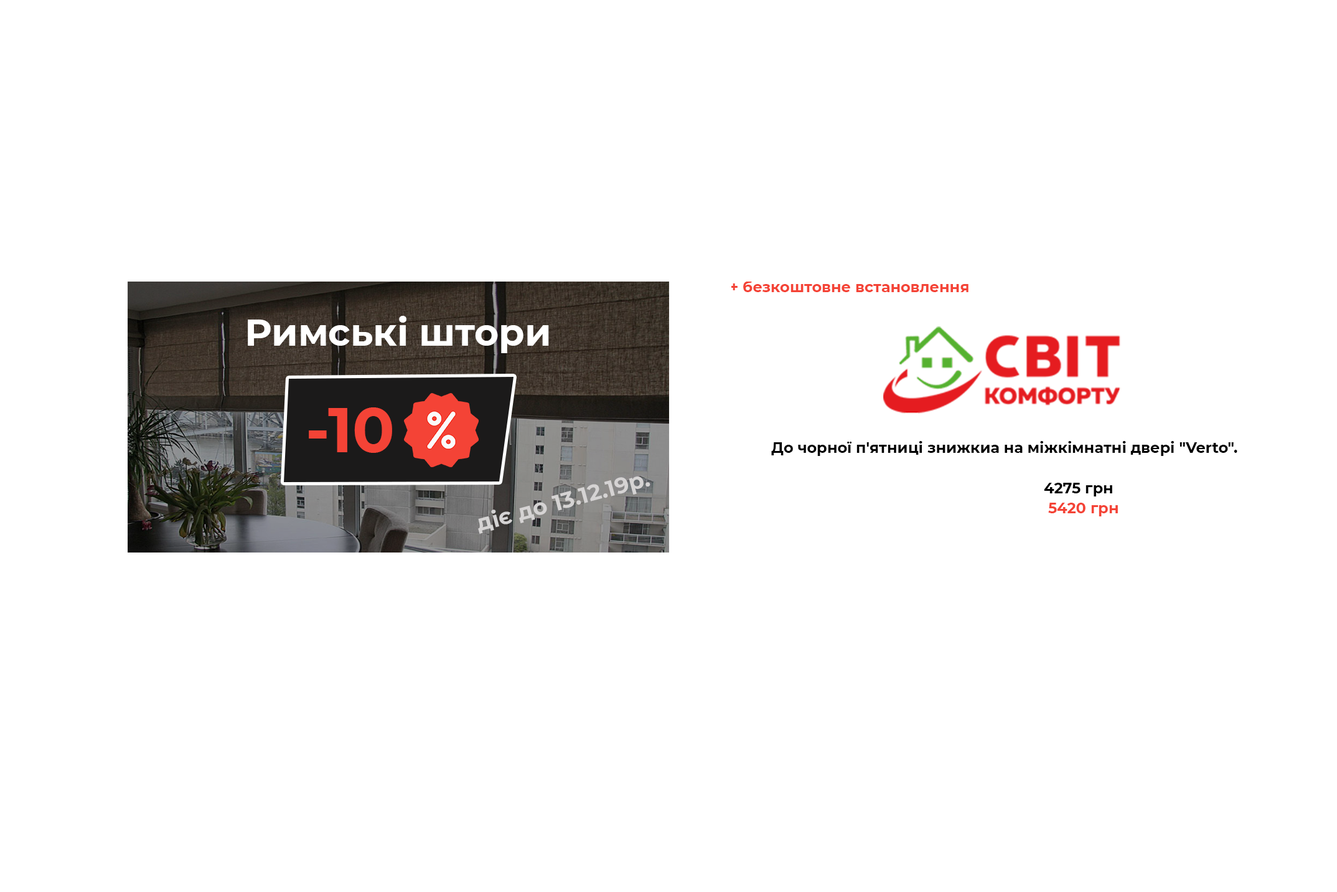
<style>
.page{position:relative;width:1337px;height:892px;background:#ffffff}
.page>*{position:absolute;margin:0}
.t1{font:14.9px "Montserrat-Bold";color:#f44336}
.t2{font:37.4px "Montserrat-Bold";color:#ffffff}
.t3{font:62.3px "Montserrat-Bold";color:#f44336}
.t4{font:14.9px "Montserrat-Bold";color:#000000}
.t5{font:22.4px "Montserrat-Bold";color:#d5d3d3}
</style>
<div class="page">
<p class="t1" style="left:730px;top:280px;width:239px;height:12px">+ безкоштовне встановлення</p>
<p class="t2" style="left:248px;top:316px;width:301px;height:37px">Римські штори</p>
<p class="t3" style="left:309px;top:407px;width:83px;height:46px">-10</p>
<p class="t4" style="left:771px;top:441px;width:467px;height:15px">До чорної п'ятниці знижкиа на міжкімнатні двері "Verto".</p>
<p class="t5" style="left:478px;top:476px;width:173px;height:58px;rotate:-15deg">діє до 13.12.19р.</p>
<p class="t4" style="left:1044px;top:483px;width:69px;height:13px">4275 грн</p>
<p class="t1" style="left:1049px;top:502px;width:69px;height:14px">5420 грн</p>
</div>
